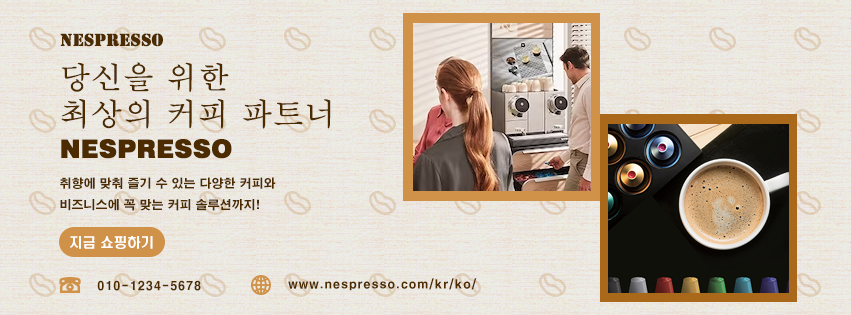
<style>
.page{position:relative;width:851px;height:315px}
.page>*{position:absolute;margin:0}
.t1{font:18px "Stencil";color:#4c2b00;font-weight:bold}
.t2{font:31px/36px "H2mjsM";color:#4c2b00;font-weight:bold}
.t3{font:25px/32px "Swiss721BT-Black";color:#4c2b00;font-weight:bold}
.t4{font:12px/21px "H2gtrE";color:#4c2b00}
.t5{font:13.4px "H2hdrM";color:#ffffff}
.t6{font:12px "H2gtrE";letter-spacing:0.04em;color:#4c2b00}
</style>
<div class="page">
<p class="t1" style="left:60px;top:33px;width:103px;height:14px">NESPRESSO</p>
<p class="t2" style="left:61px;top:62px;width:270px;height:97px">당신을 위한<br>최상의 커피 파트너 <br><span class="t3">NESPRESSO</span></p>
<p class="t4" style="left:60px;top:177px;width:216px;height:34px">취향에 맞춰 즐기 수 있는 다양한 커피와<br>비즈니스에 꼭 맞는 커피 솔루션까지!</p>
<p class="t5" style="left:70px;top:236px;width:83px;height:13px">지금 쇼핑하기</p>
<p class="t6" style="left:97px;top:280px;width:104px;height:11px">010-1234-5678</p>
<p class="t6" style="left:288px;top:278px;width:189px;height:13px">www.nespresso.com/kr/ko/</p>
</div>
